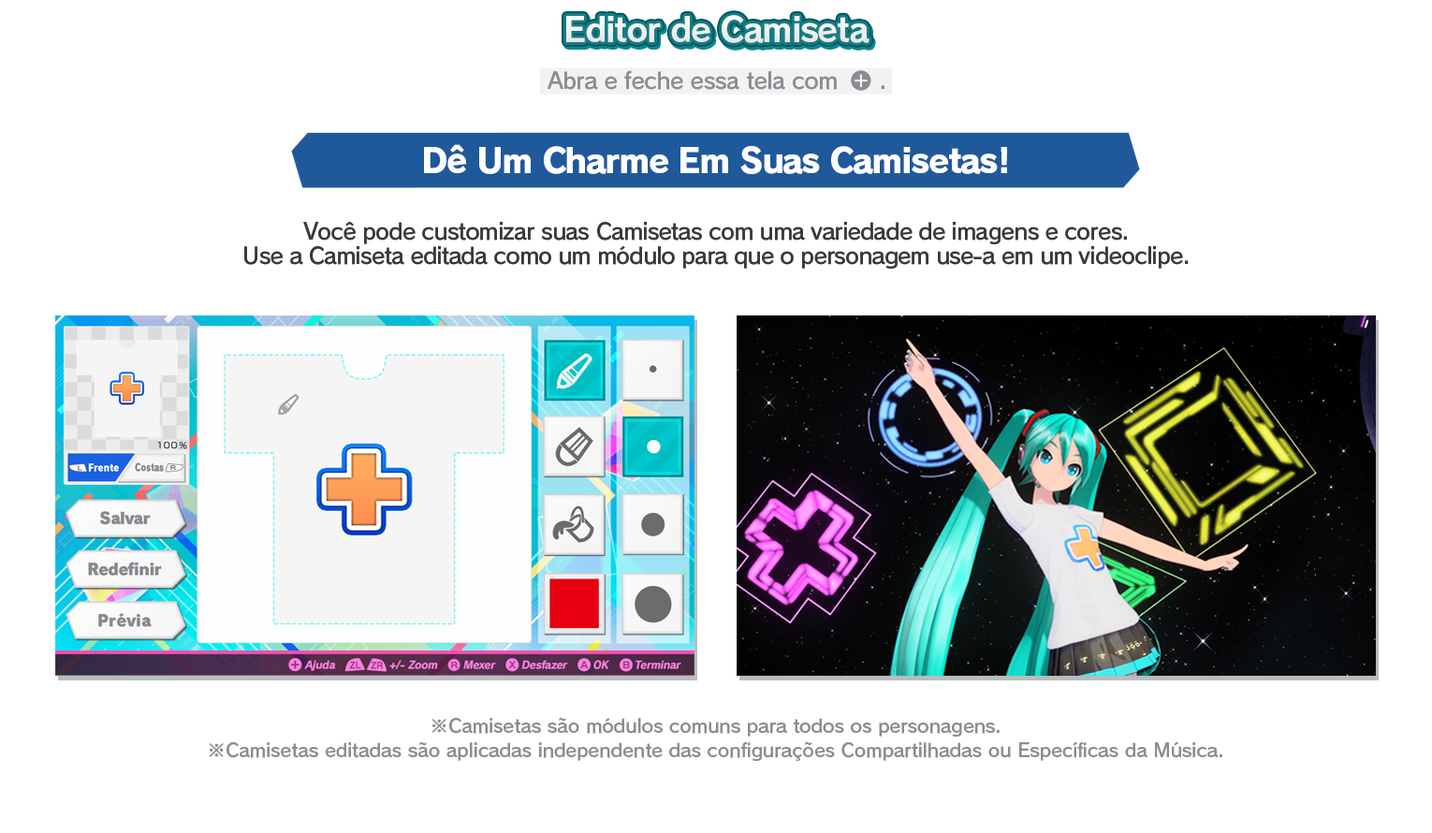
<style>
.page{position:relative;width:1432px;height:833px;background:#ffffff}
.page>*{position:absolute;margin:0}
.t1{font:33.7px "RodinPro-B";letter-spacing:-0.039em;color:#f0f0f1}
.t2{font:22.5px "RodinPro-DB";letter-spacing:-0.025em;color:#8c8b93}
.t3{font:33.7px "RodinPro-EB";letter-spacing:-0.048em;color:#ffffff}
.t4{font:22.5px/23.7px "RodinPro-DB";letter-spacing:-0.04em;color:#383a3a}
.t5{font:18.7px/23.7px "RodinPro-DB";letter-spacing:-0.014em;color:#8c8b92}
</style>
<div class="page">
<p class="t1" style="left:566px;top:15px;width:303px;height:28px">Editor de Camiseta</p>
<p class="t2" style="left:547px;top:70px;width:290px;height:20px">Abra e feche essa tela com</p>
<p class="t2" style="left:881px;top:85px;width:3px;height:4px">.</p>
<p class="t3" style="left:424px;top:144px;width:583px;height:30px">Dê Um Charme Em Suas Camisetas!</p>
<p class="t4" style="left:244px;top:222px;width:944px;height:47px;text-align:center">Você pode customizar suas Camisetas com uma variedade de imagens e cores.<br>Use a Camiseta editada como um módulo para que o personagem use-a em um videoclipe.</p>
<p class="t5" style="left:209px;top:718px;width:1013px;height:43px;text-align:center">※Camisetas são módulos comuns para todos os personagens.<br>※Camisetas editadas são aplicadas independente das configurações Compartilhadas ou Específicas da Música.</p>
</div>
